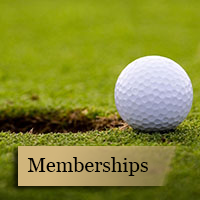
<style>
.page{position:relative;width:200px;height:200px}
.page>*{position:absolute;margin:0}
.t1{font:12px "Georgia";color:#000000}
</style>
<div class="page">
<p class="t1" style="left:27px;top:157px;width:121px;height:19px">Memberships</p>
</div>
